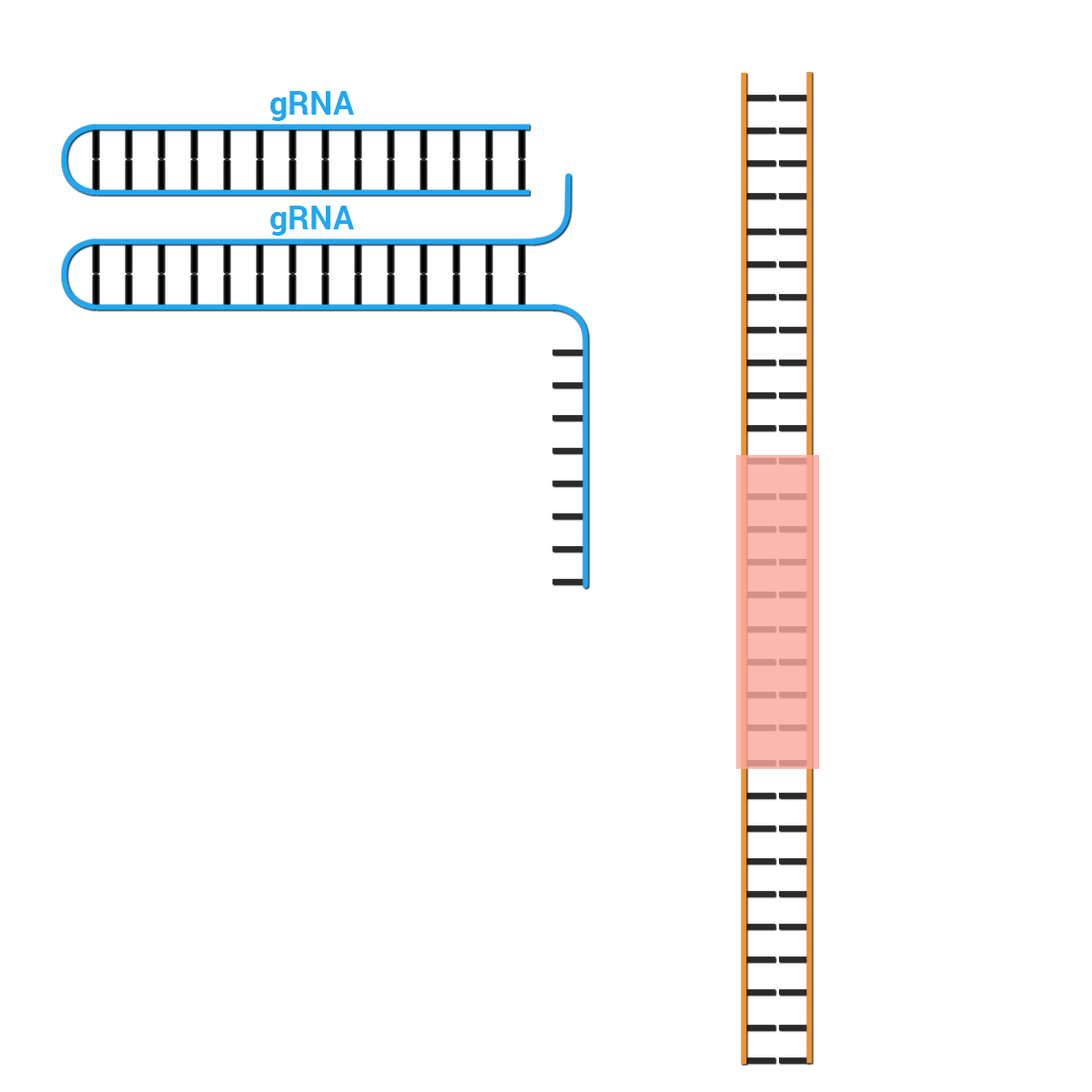
<style>
.page{position:relative;width:1092px;height:1092px;background:#ffffff}
.page>*{position:absolute;margin:0}
.t1{font:32.8px "Roboto-Bold";color:#22a7f0}
</style>
<div class="page">
<p class="t1" style="left:270px;top:91px;width:84px;height:30px">gRNA</p>
<p class="t1" style="left:270px;top:206px;width:84px;height:30px">gRNA</p>
</div>
